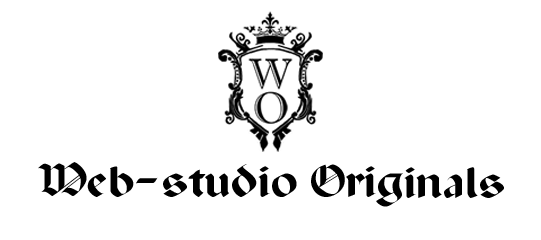
<style>
.page{position:relative;width:541px;height:240px;background:#ffffff}
.page>*{position:absolute;margin:0}
.t1{font:47px "PaladinPCRusMedium";color:#000000}
</style>
<div class="page">
<p class="t1" style="left:38px;top:162px;width:466px;height:45px">Web-studio Originals</p>
</div>
